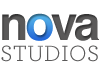
<style>
.page{position:relative;width:101px;height:65px;background:#ffffff}
.page>*{position:absolute;margin:0}
.t1{font:48px "Helvetica-Bold";letter-spacing:-0.05em;color:#5a5959}
.t2{font:48px "Helvetica-Bold";letter-spacing:-0.05em;color:#53b2e8}
.t3{font:23px "ArcherPro-Book";color:#5a5959}
</style>
<div class="page">
<p class="t1" style="left:2px;top:13px;width:97px;height:28px">n<span class="t2">o</span>va</p>
<p class="t3" style="left:1px;top:45px;width:97px;height:17px">STUDIOS</p>
</div>
